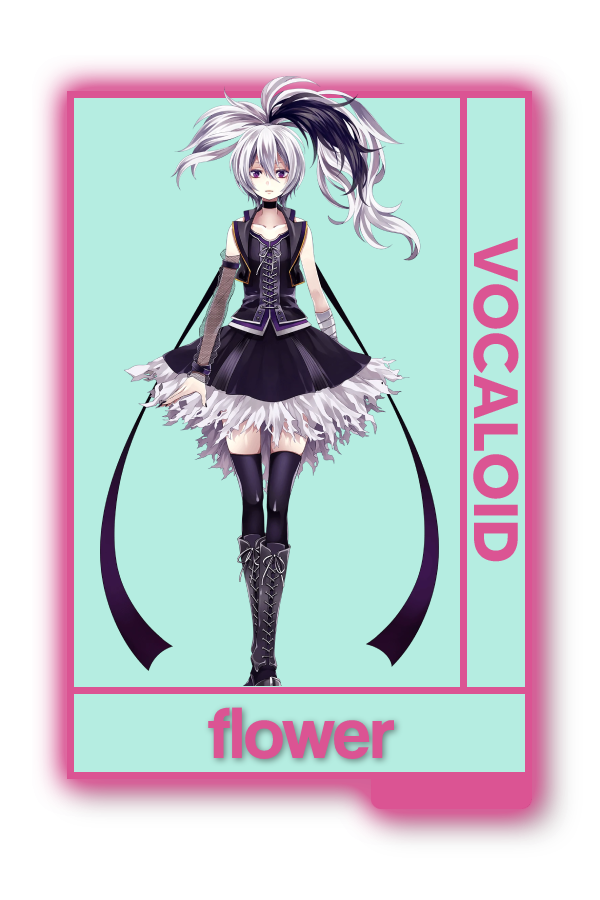
<style>
.page{position:relative;width:600px;height:900px;background:#b5ede1}
.page>*{position:absolute;margin:0}
.t1{font:62.5px "MADETOMMY-Bold";color:#db5493}
.t2{font:75px "CoolveticaRg-Regular";color:#db5493}
</style>
<div class="page">
<p class="t1" style="left:473px;top:237px;width:46px;height:325px;rotate:90deg">VOCALOID</p>
<p class="t2" style="left:208px;top:707px;width:186px;height:52px">flower</p>
</div>
